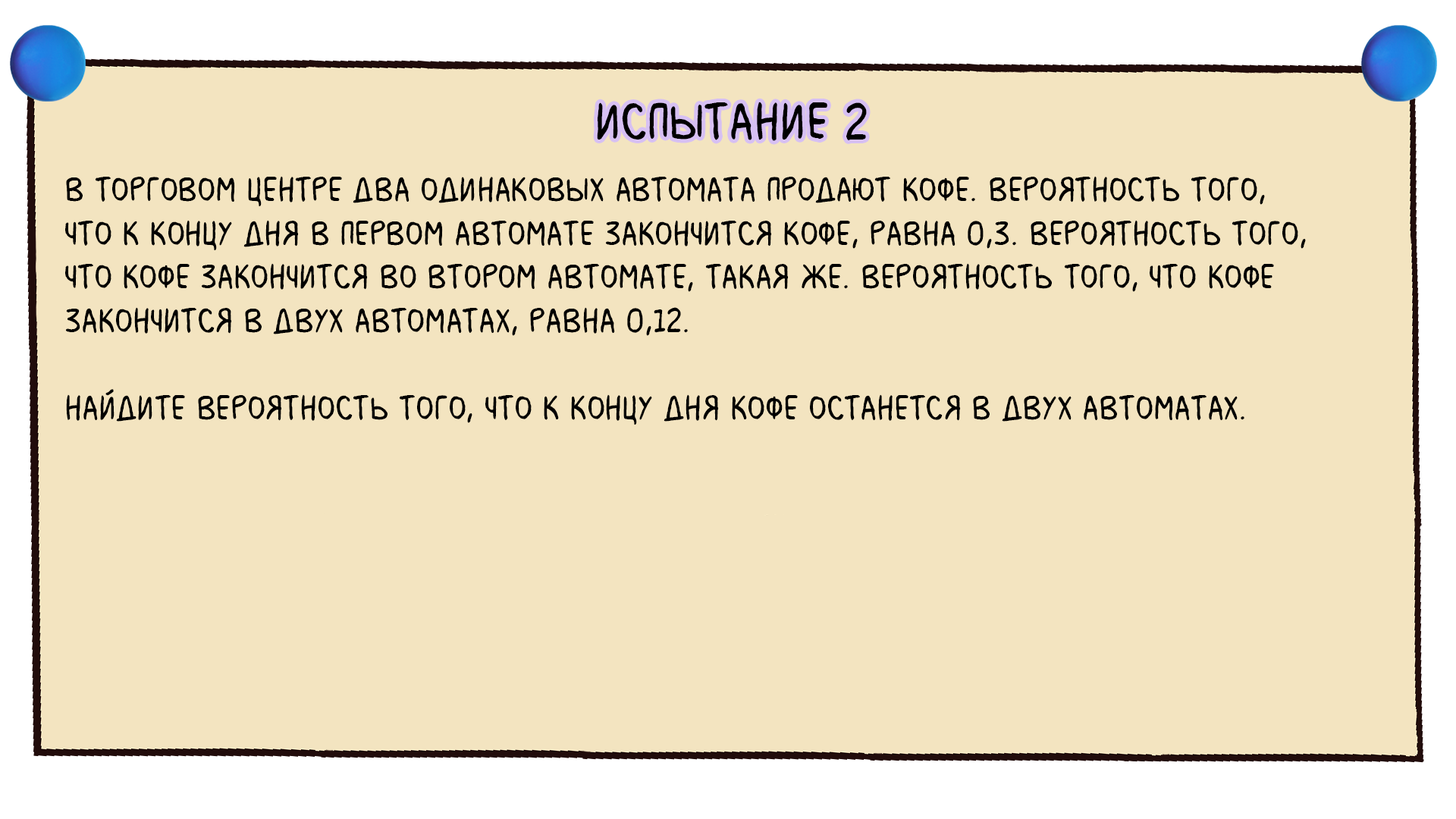
<style>
.page{position:relative;width:1456px;height:819px;background:#f3e4c0}
.page>*{position:absolute;margin:0}
.t1{font:54.6px "MilkMustacheBB";color:#000000}
.t2{font:36.4px "MilkMustacheBB";color:#000000}
</style>
<div class="page">
<p class="t1" style="left:597px;top:102px;width:270px;height:39px">испытание 2</p>
<p class="t2" style="left:65px;top:176px;width:1241px;height:249px">В торговом центре два одинаковых автомата продают кофе. Вероятность того, <br>что к концу дня в первом автомате закончится кофе, равна 0,3. Вероятность того, <br>что кофе закончится во втором автомате, такая же. Вероятность того, что кофе <br>закончится в двух автоматах, равна 0,12.<br> <br>Найдите вероятность того, что к концу дня кофе останется в двух автоматах.</p>
</div>
